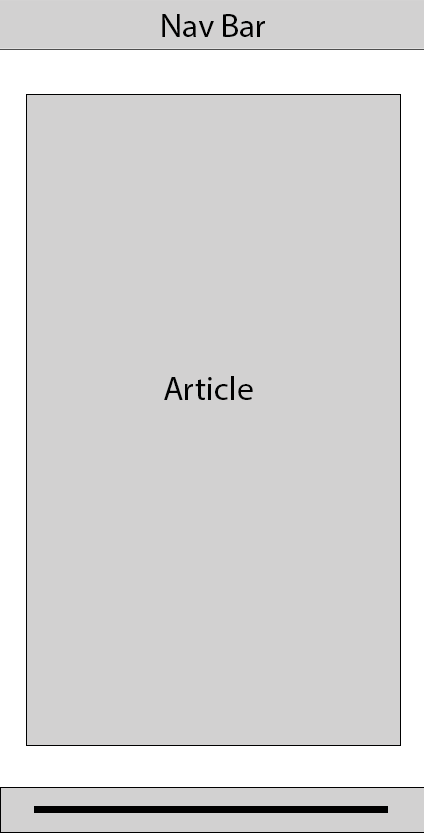
<style>
.page{position:relative;width:424px;height:833px;background:#d2d1d1}
.page>*{position:absolute;margin:0}
.t1{font:33.3px "MyriadPro-Regular";color:#000000}
</style>
<div class="page">
<p class="t1" style="left:162px;top:14px;width:103px;height:23px">Nav Bar</p>
<p class="t1" style="left:164px;top:376px;width:89px;height:24px">Article</p>
</div>
